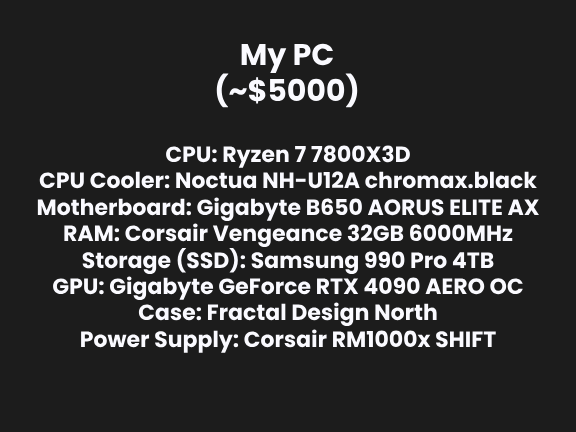
<style>
.page{position:relative;width:576px;height:432px;background:#1c1c1c}
.page>*{position:absolute;margin:0}
.t1{font:30px "Poppins-Bold";color:#fafaff}
.t2{font:22px "Poppins-Bold";color:#fafaff}
</style>
<div class="page">
<p class="t1" style="left:216px;top:43px;width:142px;height:65px;text-align:center">My PC<br>(~$5000)</p>
<p class="t2" style="left:37px;top:145px;width:502px;height:208px;text-align:center">CPU: Ryzen 7 7800X3D<br>CPU Cooler: Noctua NH-U12A chromax.black<br>Motherboard: Gigabyte B650 AORUS ELITE AX<br>RAM: Corsair Vengeance 32GB 6000MHz<br>Storage (SSD): Samsung 990 Pro 4TB<br>GPU: Gigabyte GeForce RTX 4090 AERO OC<br>Case: Fractal Design North<br>Power Supply: Corsair RM1000x SHIFT</p>
</div>
